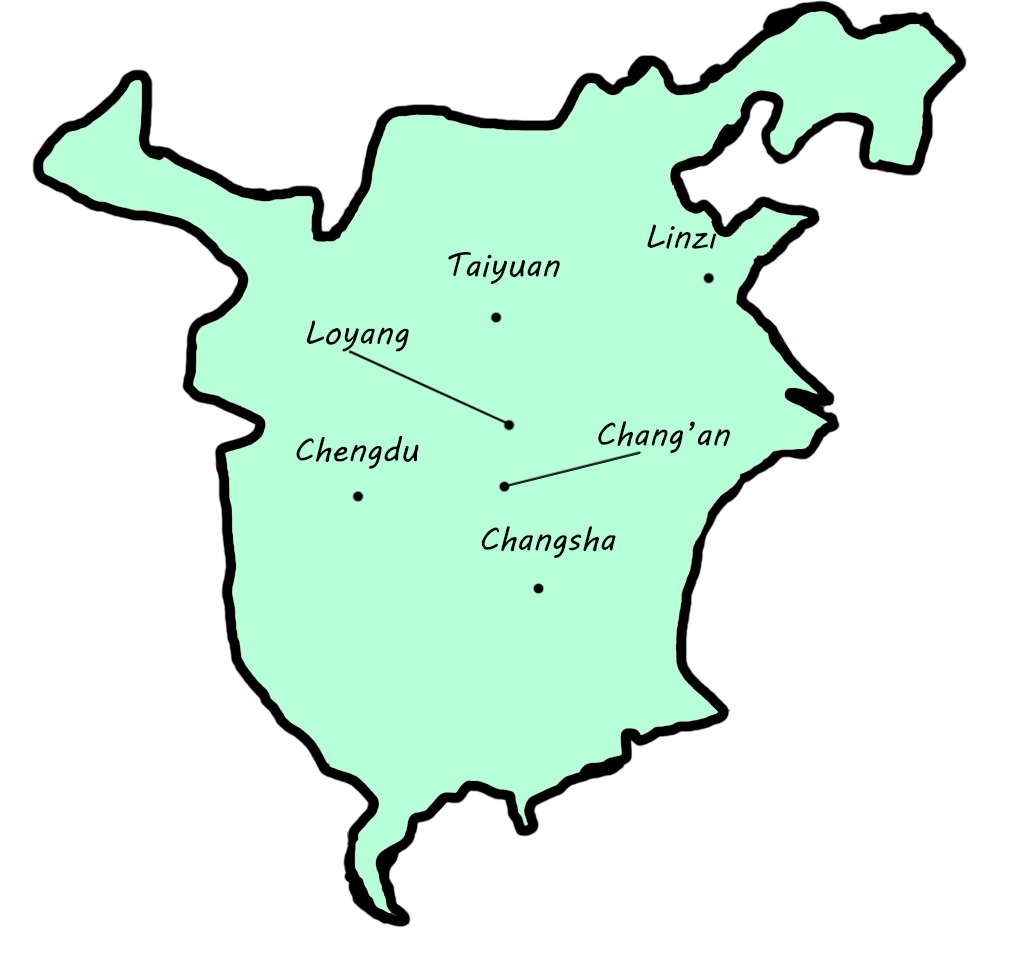
<style>
.page{position:relative;width:1022px;height:971px;background:#ffffff}
.page>*{position:absolute;margin:0}
.t1{font:33.3px "MVBoli";color:#000000}
</style>
<div class="page">
<p class="t1" style="left:647px;top:224px;width:72px;height:25px">Linzi</p>
<p class="t1" style="left:448px;top:252px;width:112px;height:32px">Taiyuan</p>
<p class="t1" style="left:306px;top:320px;width:103px;height:32px">Loyang</p>
<p class="t1" style="left:598px;top:421px;width:132px;height:32px">Chang’an</p>
<p class="t1" style="left:296px;top:435px;width:123px;height:34px">Chengdu</p>
<p class="t1" style="left:481px;top:526px;width:135px;height:32px">Changsha</p>
</div>
